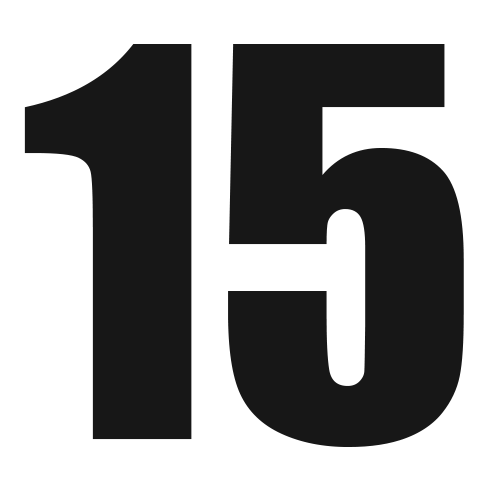
<style>
.page{position:relative;width:480px;height:480px;background:#ffffff}
.page>*{position:absolute;margin:0}
.t1{font:500px "Impact";color:#171717}
</style>
<div class="page">
<p class="t1" style="left:24px;top:44px;width:440px;height:403px">15</p>
</div>
